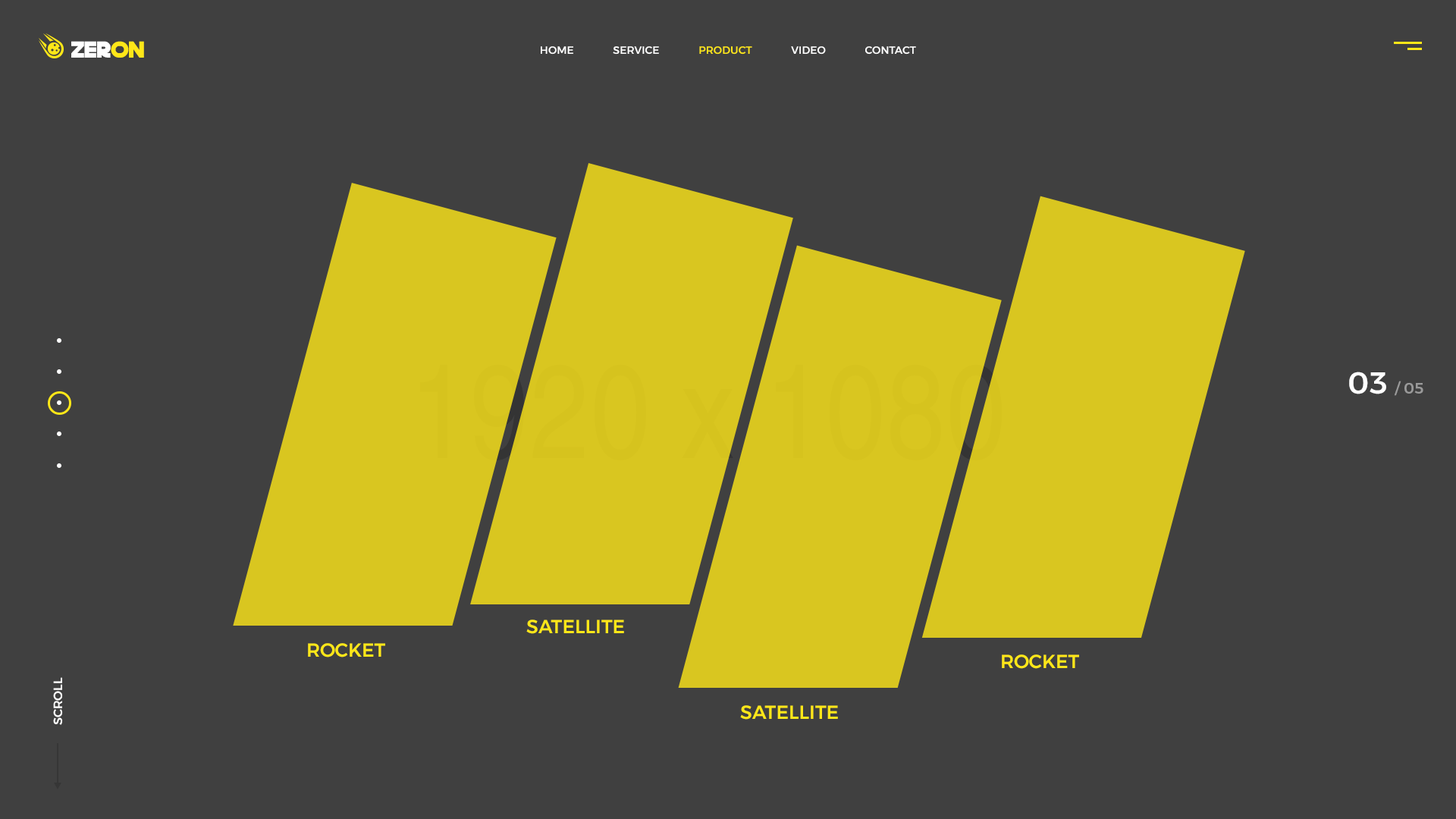
<style>
.page{position:relative;width:1456px;height:819px;background:#404040}
.page>*{position:absolute;margin:0}
.t1{font:22.7px "DeathStar";letter-spacing:0.001em;color:#ffffff}
.t2{font:22.7px "DeathStar";letter-spacing:0.001em;color:#ffe718}
.t3{font:10.6px "Montserrat-Medium";letter-spacing:0.001em;color:#ffffff}
.t4{font:10.6px "Montserrat-Medium";letter-spacing:0.001em;color:#ffe718}
.t5{font:15.2px "Montserrat-Medium";letter-spacing:0.001em;color:#9a9a9a}
.t6{font:30.3px "Montserrat-Medium";letter-spacing:0.001em;color:#ffffff}
.t7{font:19px "Montserrat-Medium";letter-spacing:0.001em;color:#ffe718;text-transform:uppercase}
.t8{font:12.1px "Montserrat-Medium";letter-spacing:0.001em;color:#ffffff}
</style>
<div class="page">
<p class="t1" style="left:71px;top:41px;width:73px;height:17px">zer<span class="t2">on</span></p>
<p class="t3" style="left:541px;top:46px;width:375px;height:9px">HOME               SERVICE               <span class="t4">PRODUCT</span>               VIDEO               CONTACT</p>
<p class="t5" style="left:1349px;top:372px;width:74px;height:24px"><span class="t6">03 </span>/ 05</p>
<p class="t7" style="left:526px;top:620px;width:98px;height:14px">satellite</p>
<p class="t7" style="left:308px;top:643px;width:77px;height:14px">ROCKET</p>
<p class="t7" style="left:1002px;top:654px;width:77px;height:15px">ROCKET</p>
<p class="t8" style="left:53px;top:677px;width:10px;height:48px;rotate:-90deg">SCROLL</p>
<p class="t7" style="left:740px;top:705px;width:98px;height:15px">satellite</p>
</div>
